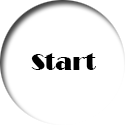
<style>
.page{position:relative;width:125px;height:125px;background:#ffffff}
.page>*{position:absolute;margin:0}
.t1{font:23.6px "Broadway";color:#000000}
</style>
<div class="page">
<p class="t1" style="left:31px;top:53px;width:65px;height:17px">Start</p>
</div>
